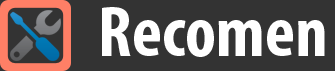
<style>
.page{position:relative;width:335px;height:71px;background:#333333}
.page>*{position:absolute;margin:0}
.t1{font:72px "MyriadPro-BoldCond";color:#ffffff}
</style>
<div class="page">
<p class="t1" style="left:102px;top:7px;width:223px;height:50px">Recomen</p>
</div>
